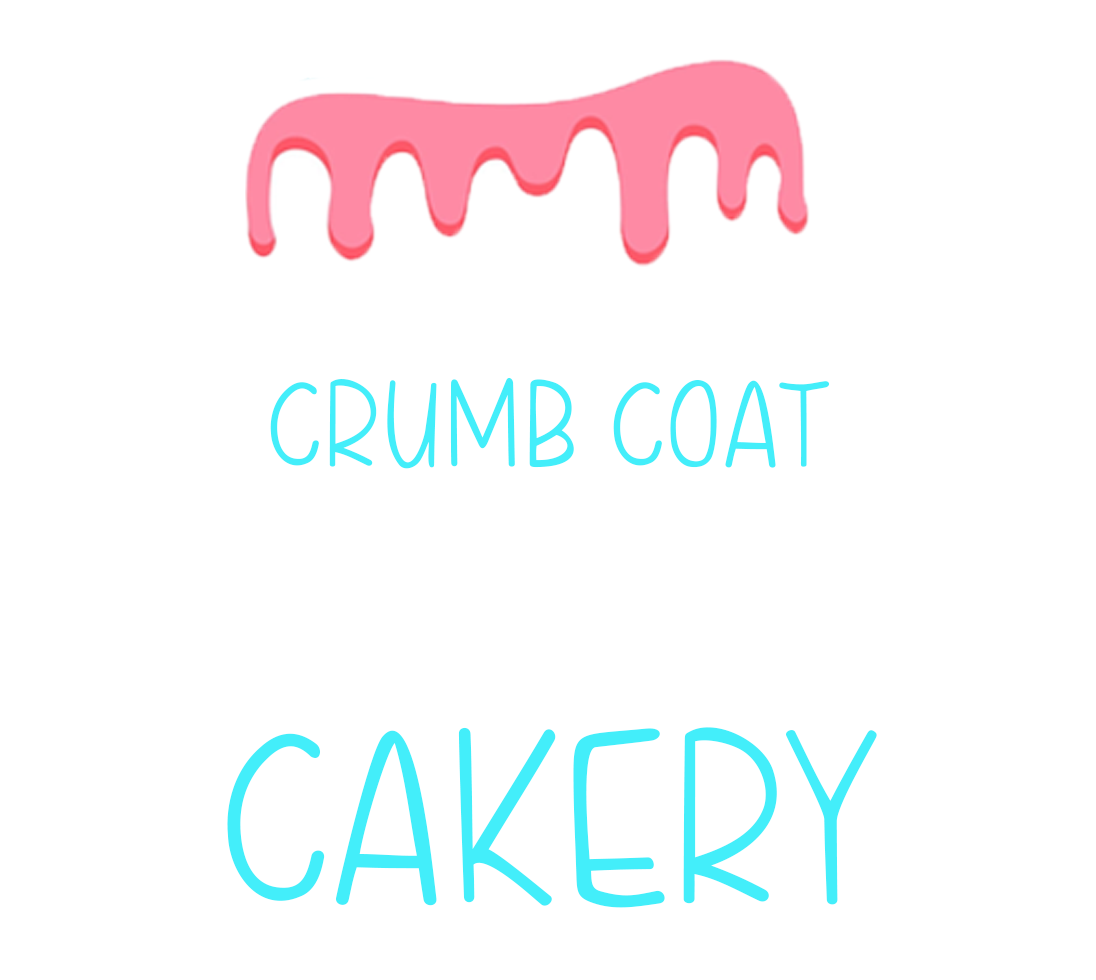
<style>
.page{position:relative;width:1096px;height:980px;background:#ffffff}
.page>*{position:absolute;margin:0}
.t1{font:124px "CupcakeTreatsRegular";color:#43eefa}
.t2{font:249px "CupcakeTreatsRegular";color:#43eefa}
</style>
<div class="page">
<p class="t1" style="left:270px;top:377px;width:560px;height:92px">CRUMB COAT</p>
<p class="t2" style="left:227px;top:727px;width:650px;height:181px">CAKERY</p>
</div>
